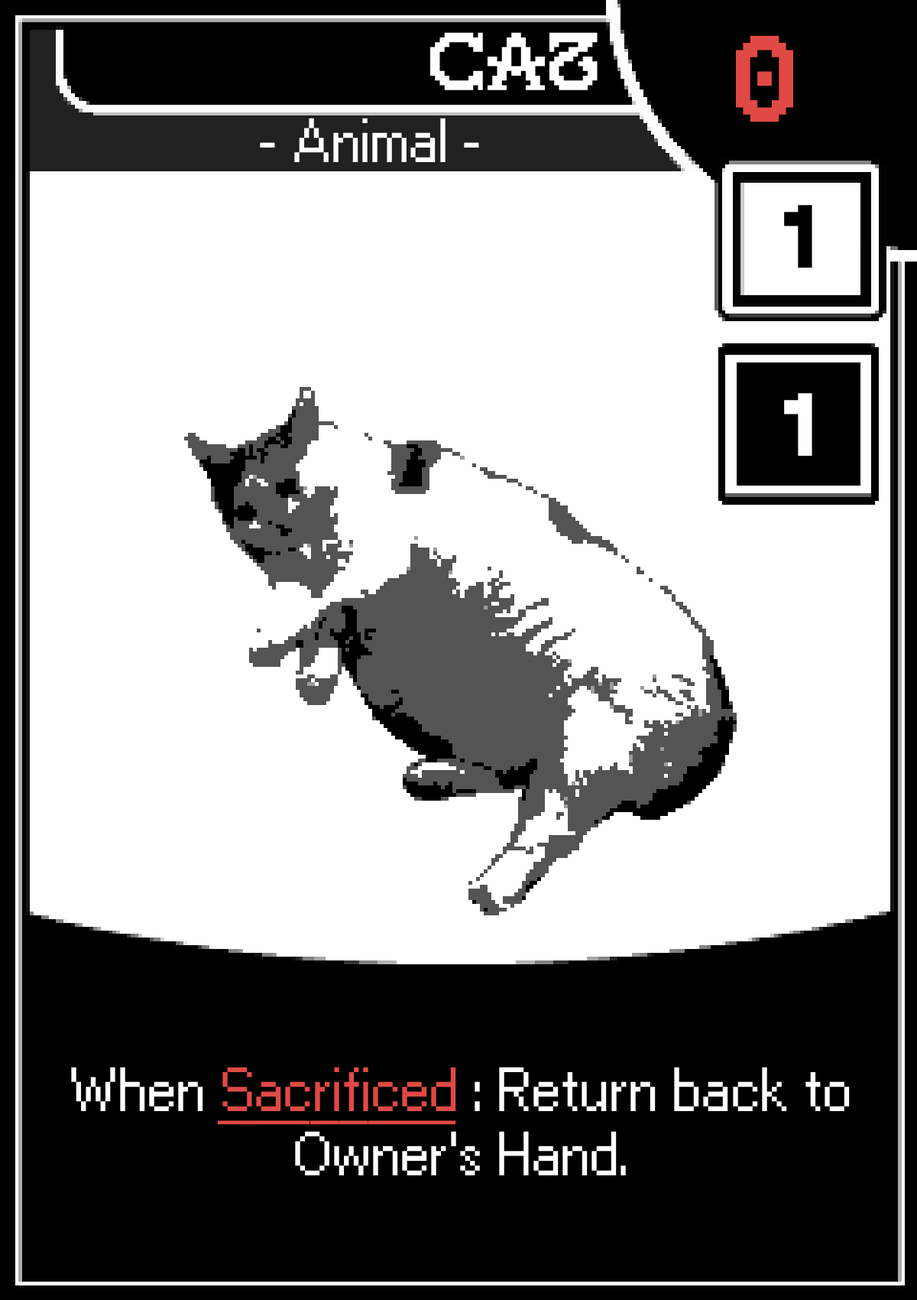
<style>
.page{position:relative;width:917px;height:1300px;background:#ffffff}
.page>*{position:absolute;margin:0}
.t1{font:76.5px "GallaeciaForte";color:#ffffff}
.t2{font:114.7px "GallaeciaForte";color:#e04944}
.t3{font:53.5px "Ari-W9500-Regular";color:#ffffff}
.t4{font:76.5px "AriW9500-Condensed-Display";color:#000000}
.t5{font:76.5px "AriW9500-Condensed-Display";color:#ffffff}
.t6{font:53.5px "Ari-W9500-Regular";color:#e04944;text-decoration:underline}
</style>
<div class="page">
<p class="t1" style="left:430px;top:32px;width:168px;height:58px">Cat</p>
<p class="t2" style="left:736px;top:35px;width:58px;height:87px">0</p>
<p class="t3" style="left:260px;top:118px;width:219px;height:44px">- Animal -</p>
<p class="t4" style="left:784px;top:205px;width:29px;height:63px">1</p>
<p class="t5" style="left:784px;top:393px;width:29px;height:63px">1</p>
<p class="t3" style="left:71px;top:1067px;width:779px;height:108px;text-align:center">When <span class="t6">Sacrificed </span>: Return back to Owner's Hand.</p>
</div>
